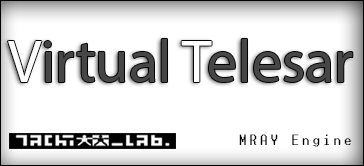
<style>
.page{position:relative;width:364px;height:166px;background:#ffffff}
.page>*{position:absolute;margin:0}
.t1{font:60px "MyriadPro-Regular";color:#464646}
.t2{font:60px "MyriadPro-Regular";color:#ffffff}
.t3{font:14px "Terminal";color:#000000}
</style>
<div class="page">
<p class="t1" style="left:8px;top:39px;width:345px;height:43px"><span class="t2">V</span>irtual <span class="t2">T</span>elesar</p>
<p class="t3" style="left:239px;top:134px;width:112px;height:13px">MRAY Engine</p>
</div>
